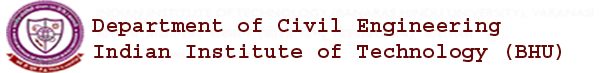
<style>
.page{position:relative;width:600px;height:73px;background:#ffffff}
.page>*{position:absolute;margin:0}
.t1{font:22px "Courier-Bold";color:#660808}
</style>
<div class="page">
<p class="t1" style="left:92px;top:18px;width:469px;height:44px">Department of Civil Engineering<br>Indian Institute of Technology (BHU)</p>
</div>
